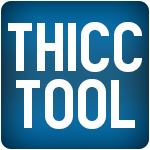
<style>
.page{position:relative;width:150px;height:150px;background:#ffffff}
.page>*{position:absolute;margin:0}
.t1{font:62.5px/56.8px "Nostromo-Cond";color:#ffffff}
</style>
<div class="page">
<p class="t1" style="left:8px;top:22px;width:134px;height:107px;text-align:center">ThICC<br>TOOL</p>
</div>
